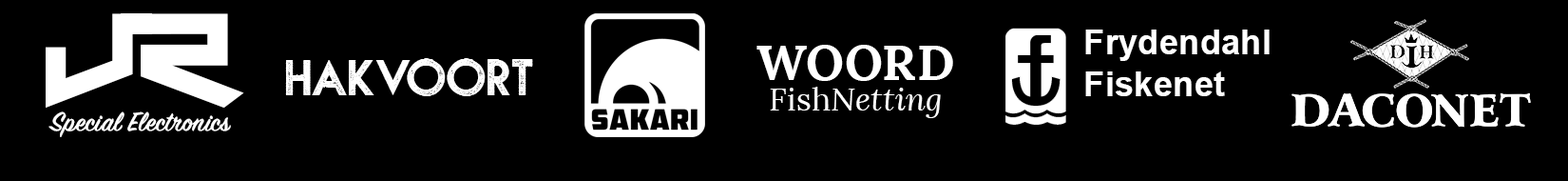
<style>
.page{position:relative;width:1568px;height:181px;background:#000000}
.page>*{position:absolute;margin:0}
.t1{font:136.8px "Nero";letter-spacing:0.01em;color:#ffffff}
.t2{font:34.3px "Arial-BoldMT";letter-spacing:0.01em;color:#ffffff}
.t3{font:48.9px "Lora-Bold";letter-spacing:0.01em;color:#ffffff}
.t4{font:57.1px "NOVASTAMP-Bold";letter-spacing:0.01em;color:#ffffff}
.t5{font:31.8px "Lora-Italic";letter-spacing:0.01em;color:#ffffff}
.t6{font:31.8px "Lora-Regular";letter-spacing:0.01em;color:#ffffff}
.t7{font:29.8px "SignPainter-HouseScriptSemibold";letter-spacing:0.01em;color:#ffffff}
</style>
<div class="page">
<p class="t1" style="left:46px;top:13px;width:198px;height:94px">JR</p>
<p class="t2" style="left:1085px;top:29px;width:185px;height:67px">Frydendahl<br>Fiskenet</p>
<p class="t3" style="left:756px;top:45px;width:197px;height:36px">WOORD</p>
<p class="t4" style="left:285px;top:58px;width:248px;height:38px">HAKVOORT</p>
<p class="t5" style="left:770px;top:86px;width:171px;height:32px"><span class="t6">Fish</span>Netting</p>
<p class="t7" style="left:48px;top:111px;width:183px;height:26px">Special Electronics</p>
</div>
